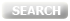
<style>
.page{position:relative;width:70px;height:21px;background:#ffffff}
.page>*{position:absolute;margin:0}
.t1{font:12px "Tahoma-Bold";color:#ffffff}
</style>
<div class="page">
<p class="t1" style="left:12px;top:6px;width:49px;height:9px">SEARCH</p>
</div>
